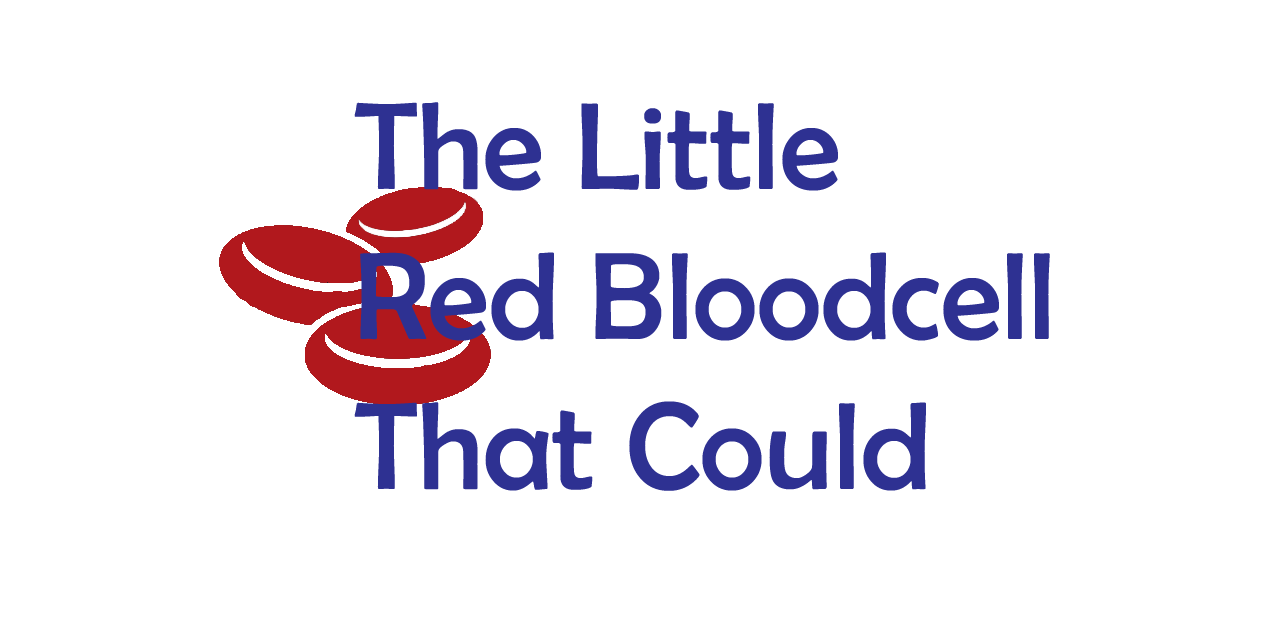
<style>
.page{position:relative;width:1284px;height:633px;background:#ffffff}
.page>*{position:absolute;margin:0}
.t1{font:125px "BerlinSansFB-Reg";color:#2e3192}
</style>
<div class="page">
<p class="t1" style="left:354px;top:102px;width:696px;height:389px">The Little <br>Red Bloodcell <br>That Could</p>
</div>
